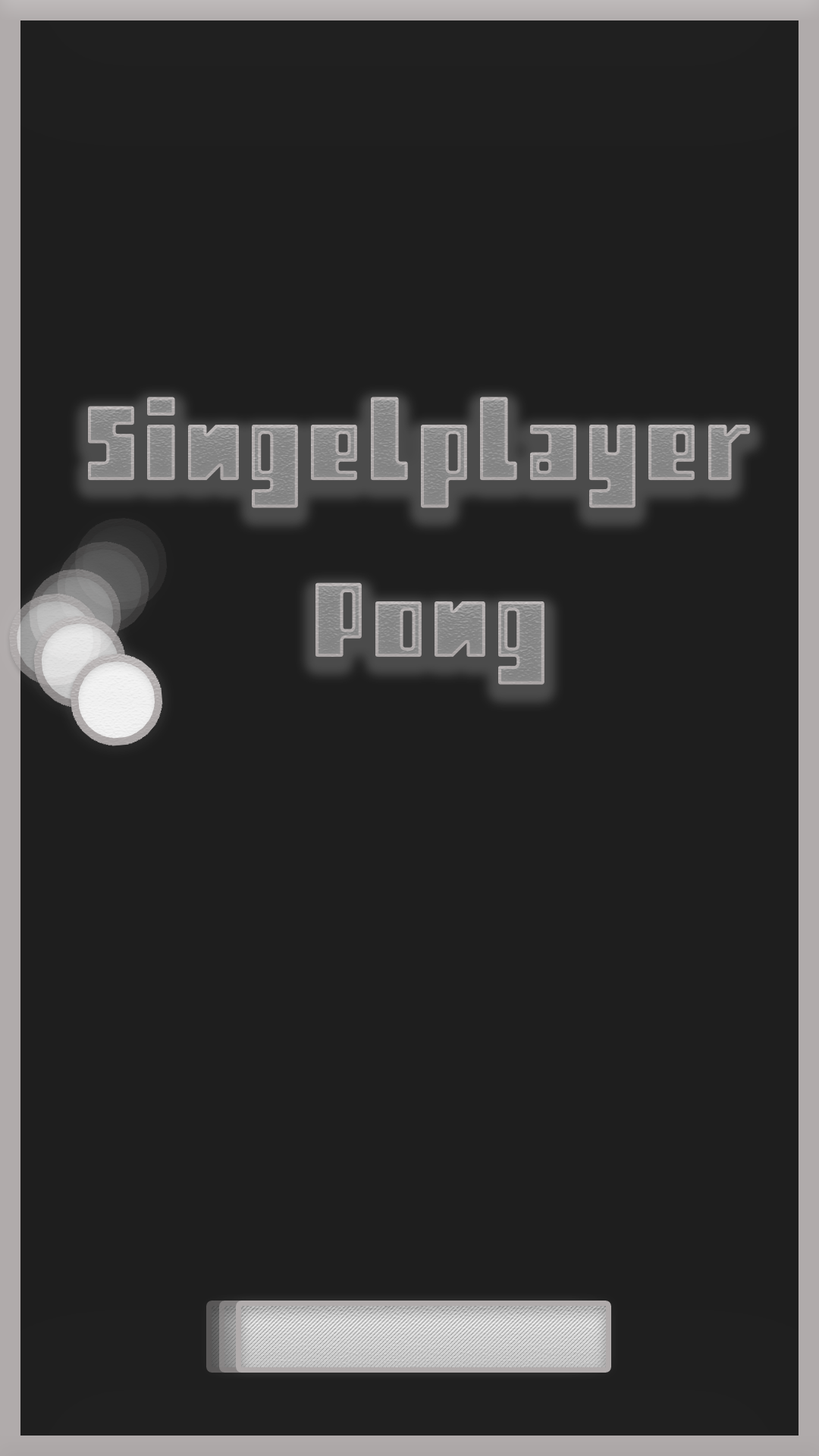
<style>
.page{position:relative;width:819px;height:1456px;background:#1e1e1e}
.page>*{position:absolute;margin:0}
.t1{font:147.5px "Retro"}
</style>
<div class="page">
<p class="t1" style="left:88px;top:397px;width:662px;height:288px;text-align:center">Singelplayer<br> Pong</p>
</div>
